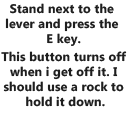
<style>
.page{position:relative;width:128px;height:128px;background:#ffffff}
.page>*{position:absolute;margin:0}
.t1{font:12.5px "MicrosoftPhagsPa-Bold";letter-spacing:0.01em;color:#1e1e1e}
</style>
<div class="page">
<p class="t1" style="left:5px;top:3px;width:114px;height:43px;text-align:center">Stand next to the <br>lever and press the <br>E key.</p>
<p class="t1" style="left:1px;top:51px;width:126px;height:56px;text-align:center">This button turns off <br>when i get off it. I <br>should use a rock to <br>hold it down.</p>
</div>
